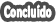
<style>
.page{position:relative;width:56px;height:22px;background:#4c4c4c}
.page>*{position:absolute;margin:0}
.t1{font:14.4px "RodinPro-EB";color:#ffffff;font-weight:bold;scale:0.6 1}
</style>
<div class="page">
<p class="t1" style="left:4px;top:4px;width:48px;height:14px">Concluído</p>
</div>
